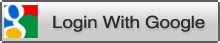
<style>
.page{position:relative;width:220px;height:43px;background:#cccccc}
.page>*{position:absolute;margin:0}
.t1{font:16.7px "HelveticaLTStd-Roman";letter-spacing:-0.01em;color:#2e2d2d;scale:1.14 1}
</style>
<div class="page">
<p class="t1" style="left:53px;top:15px;width:152px;height:17px">Login With Google</p>
</div>
